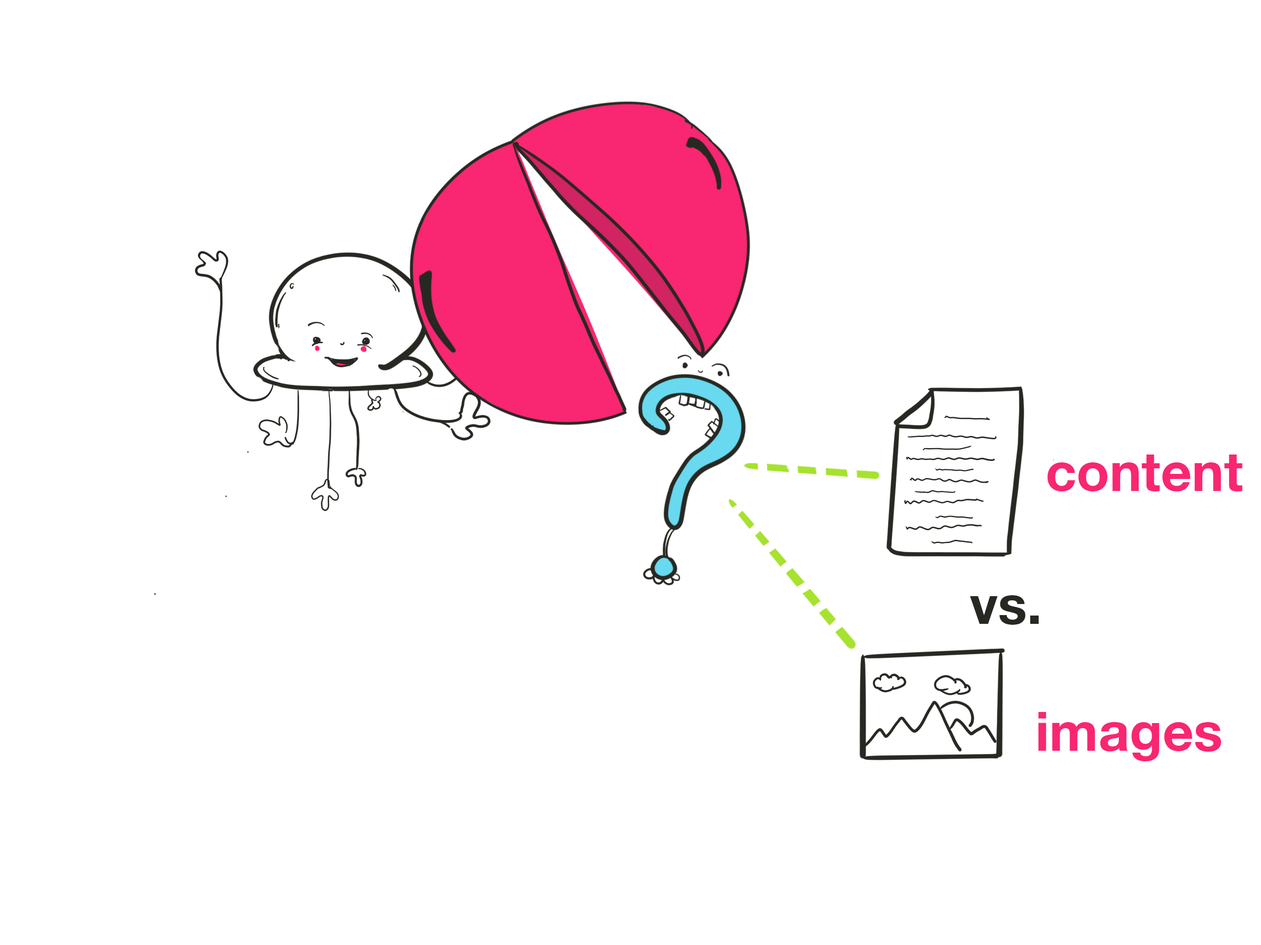
<style>
.page{position:relative;width:1261px;height:945px;background:#ffffff}
.page>*{position:absolute;margin:0}
.t1{font:54.2px "HelveticaNeue-Bold";color:#f92672}
.t2{font:54.2px "HelveticaNeue-Bold";color:#272822}
</style>
<div class="page">
<p class="t1" style="left:1047px;top:455px;width:196px;height:37px">content</p>
<p class="t2" style="left:970px;top:596px;width:69px;height:29px">vs.</p>
<p class="t1" style="left:1038px;top:712px;width:184px;height:50px">images</p>
</div>
